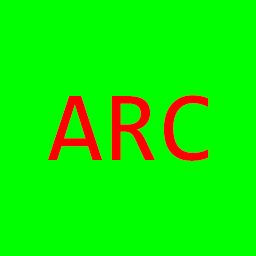
<style>
.page{position:relative;width:256px;height:256px;background:#00ff00}
.page>*{position:absolute;margin:0}
.t1{font:100px "Consolas";letter-spacing:0.01em;color:#ff0000}
</style>
<div class="page">
<p class="t1" style="left:48px;top:95px;width:161px;height:66px">ARC</p>
</div>
